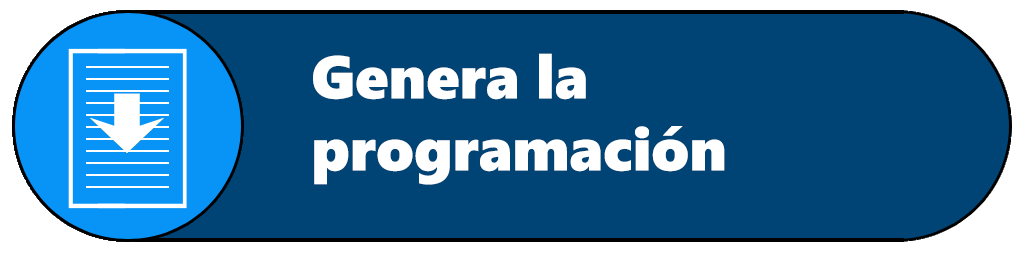
<style>
.page{position:relative;width:1024px;height:256px;background:#004476}
.page>*{position:absolute;margin:0}
.t1{font:60px "SegoeUIBlack";color:#ffffff}
</style>
<div class="page">
<p class="t1" style="left:313px;top:53px;width:412px;height:132px">Genera la<br>programación</p>
</div>
